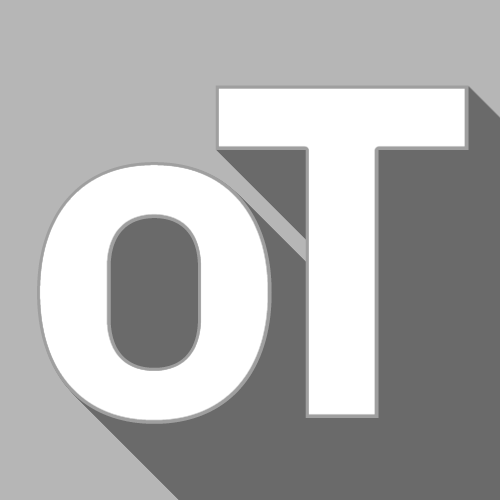
<style>
.page{position:relative;width:500px;height:500px;background:#b6b6b6}
.page>*{position:absolute;margin:0}
.t1{font:476.3px "IBMPlexSansKR-Bold";letter-spacing:-0.18em;color:#ffffff}
</style>
<div class="page">
<p class="t1" style="left:37px;top:85px;width:432px;height:339px">oT</p>
</div>
